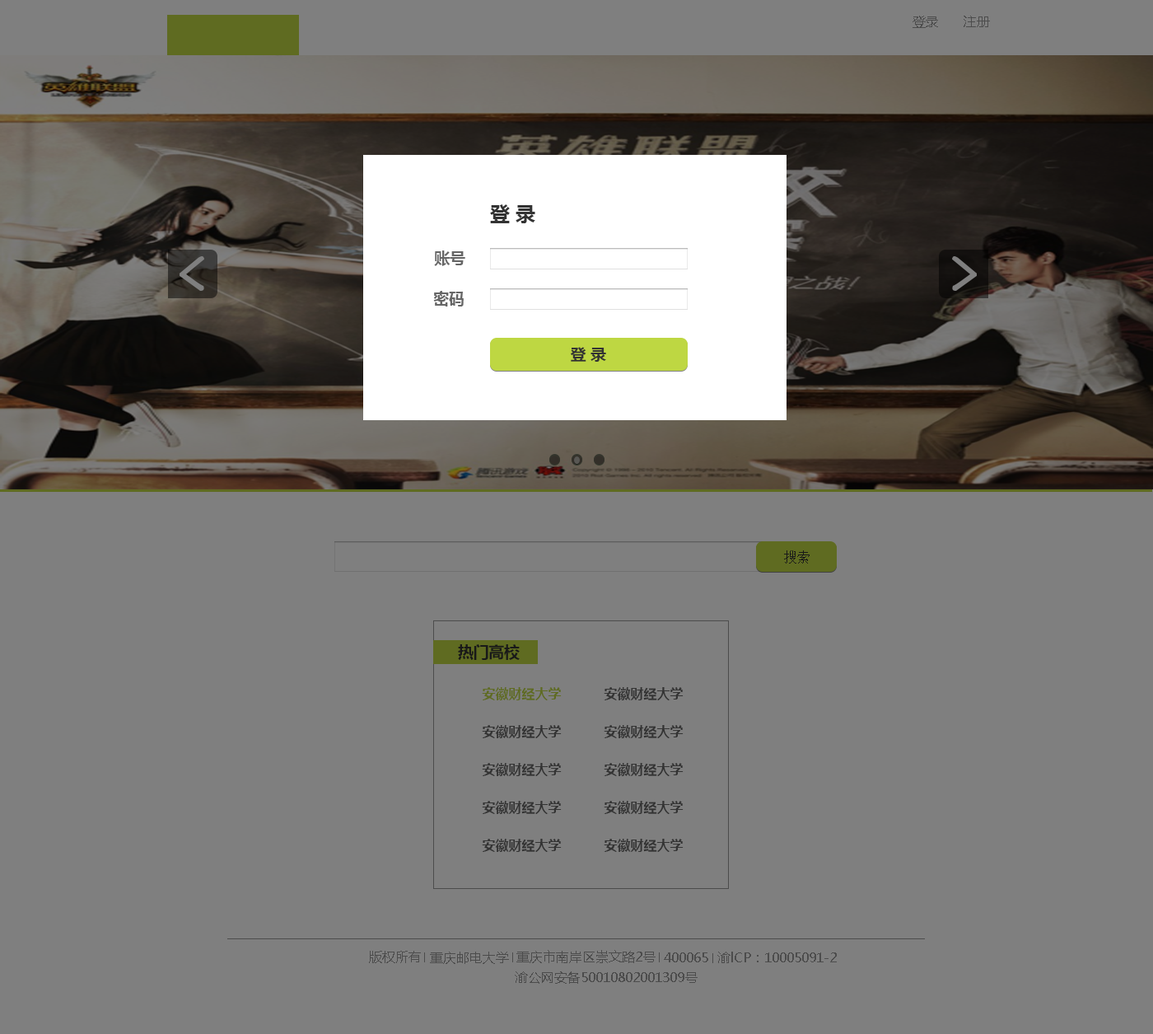
<style>
.page{position:relative;width:1153px;height:1034px;background:#7f7f7f}
.page>*{position:absolute;margin:0}
.t1{font:13.2px "MicrosoftYaHei";color:#4c4c4c}
.t2{font:19.8px "MicrosoftYaHei-Bold";color:#333333}
.t3{font:15.4px "MicrosoftYaHei-Bold";color:#666666}
.t4{font:15.4px "MicrosoftYaHei-Bold";color:#333333}
.t5{font:9.9px "SimSun";color:#191919}
.t6{font:15.4px "MicrosoftYaHei-Bold";color:#191919}
.t7{font:13.2px "MicrosoftYaHei-Bold";color:#5f6b21}
.t8{font:13.2px "MicrosoftYaHei-Bold";color:#333333}
.t9{font:9.9px "MicrosoftYaHei";color:#4c4c4c}
</style>
<div class="page">
<p class="t1" style="left:913px;top:16px;width:25px;height:12px">登录</p>
<p class="t1" style="left:964px;top:16px;width:26px;height:11px">注册</p>
<p class="t2" style="left:490px;top:204px;width:45px;height:19px">登 录</p>
<p class="t3" style="left:434px;top:250px;width:31px;height:16px">账号</p>
<p class="t3" style="left:433px;top:291px;width:31px;height:15px">密码</p>
<p class="t4" style="left:571px;top:347px;width:35px;height:15px">登 录</p>
<p class="t5" style="left:784px;top:550px;width:26px;height:13px">搜索</p>
<p class="t6" style="left:458px;top:644px;width:62px;height:16px">热门高校</p>
<p class="t7" style="left:482px;top:687px;width:80px;height:13px">安徽财经大学</p>
<p class="t8" style="left:604px;top:687px;width:80px;height:13px">安徽财经大学</p>
<p class="t8" style="left:482px;top:725px;width:80px;height:13px">安徽财经大学</p>
<p class="t8" style="left:604px;top:725px;width:80px;height:13px">安徽财经大学</p>
<p class="t8" style="left:482px;top:763px;width:80px;height:13px">安徽财经大学</p>
<p class="t8" style="left:604px;top:763px;width:80px;height:13px">安徽财经大学</p>
<p class="t8" style="left:482px;top:801px;width:80px;height:13px">安徽财经大学</p>
<p class="t8" style="left:604px;top:801px;width:80px;height:13px">安徽财经大学</p>
<p class="t8" style="left:482px;top:839px;width:80px;height:13px">安徽财经大学</p>
<p class="t8" style="left:604px;top:839px;width:80px;height:13px">安徽财经大学</p>
<p class="t9" style="left:369px;top:951px;width:52px;height:12px">版权所有</p>
<p class="t9" style="left:430px;top:952px;width:79px;height:12px">重庆邮电大学</p>
<p class="t9" style="left:517px;top:950px;width:139px;height:13px">重庆市南岸区崇文路2号</p>
<p class="t9" style="left:664px;top:952px;width:44px;height:10px">400065</p>
<p class="t9" style="left:718px;top:952px;width:119px;height:11px">渝lCP：10005091-2</p>
<p class="t9" style="left:515px;top:971px;width:183px;height:13px">渝公网安备50010802001309号</p>
</div>
